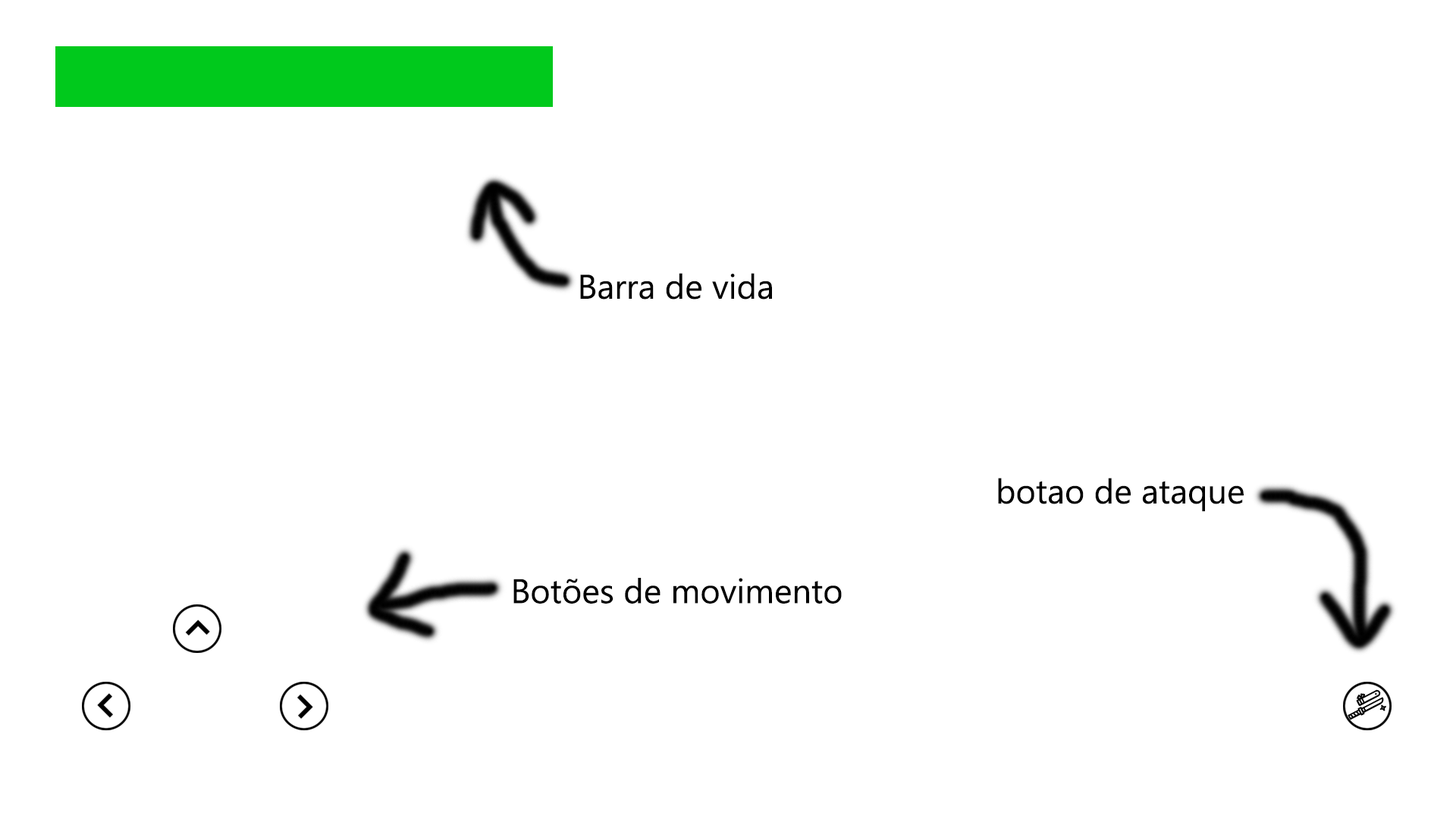
<style>
.page{position:relative;width:1456px;height:819px;background:#ffffff}
.page>*{position:absolute;margin:0}
.t1{font:34.1px "MicrosoftPhagsPa";color:#000000}
</style>
<div class="page">
<p class="t1" style="left:580px;top:273px;width:192px;height:27px">Barra de vida</p>
<p class="t1" style="left:998px;top:478px;width:246px;height:34px">botao de ataque</p>
<p class="t1" style="left:513px;top:578px;width:329px;height:26px">Botões de movimento</p>
</div>
